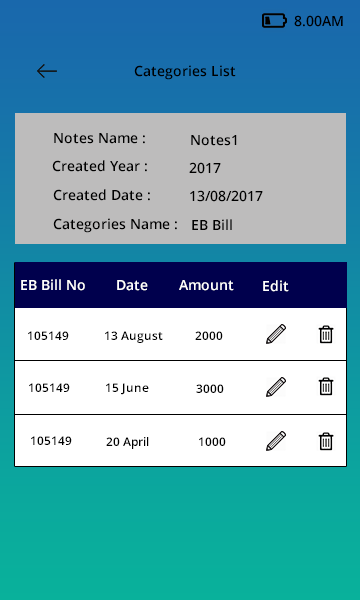
<style>
.page{position:relative;width:360px;height:600px;background:#ffffff}
.page>*{position:absolute;margin:0}
.t1{font:14px "OpenSans-Semibold";color:#000000}
.t2{font:14px "OpenSans-Semibold";color:#ffffff}
.t3{font:12px "OpenSans-Semibold";color:#000000}
</style>
<div class="page">
<p class="t1" style="left:294px;top:15px;width:49px;height:12px">8.00AM</p>
<p class="t1" style="left:134px;top:65px;width:102px;height:15px">Categories List</p>
<p class="t1" style="left:54px;top:133px;width:91px;height:11px">Notes Name :</p>
<p class="t1" style="left:191px;top:135px;width:46px;height:11px">Notes1</p>
<p class="t1" style="left:52px;top:160px;width:95px;height:12px">Created Year :</p>
<p class="t1" style="left:189px;top:162px;width:32px;height:12px">2017</p>
<p class="t1" style="left:53px;top:189px;width:97px;height:12px">Created Date :</p>
<p class="t1" style="left:190px;top:190px;width:73px;height:12px">13/08/2017</p>
<p class="t1" style="left:53px;top:218px;width:124px;height:15px">Categories Name :</p>
<p class="t1" style="left:192px;top:219px;width:40px;height:11px">EB Bill</p>
<p class="t2" style="left:21px;top:279px;width:64px;height:12px">EB Bill No</p>
<p class="t2" style="left:117px;top:280px;width:31px;height:11px">Date</p>
<p class="t2" style="left:179px;top:280px;width:55px;height:11px">Amount</p>
<p class="t2" style="left:263px;top:280px;width:26px;height:12px">Edit</p>
<p class="t3" style="left:28px;top:331px;width:41px;height:9px">105149</p>
<p class="t3" style="left:105px;top:331px;width:58px;height:12px">13 August</p>
<p class="t3" style="left:195px;top:331px;width:28px;height:9px">2000</p>
<p class="t3" style="left:29px;top:383px;width:41px;height:9px">105149</p>
<p class="t3" style="left:106px;top:383px;width:43px;height:12px">15 June</p>
<p class="t3" style="left:196px;top:384px;width:28px;height:9px">3000</p>
<p class="t3" style="left:31px;top:436px;width:41px;height:9px">105149</p>
<p class="t3" style="left:106px;top:437px;width:43px;height:12px">20 April</p>
<p class="t3" style="left:199px;top:437px;width:27px;height:9px">1000</p>
</div>
